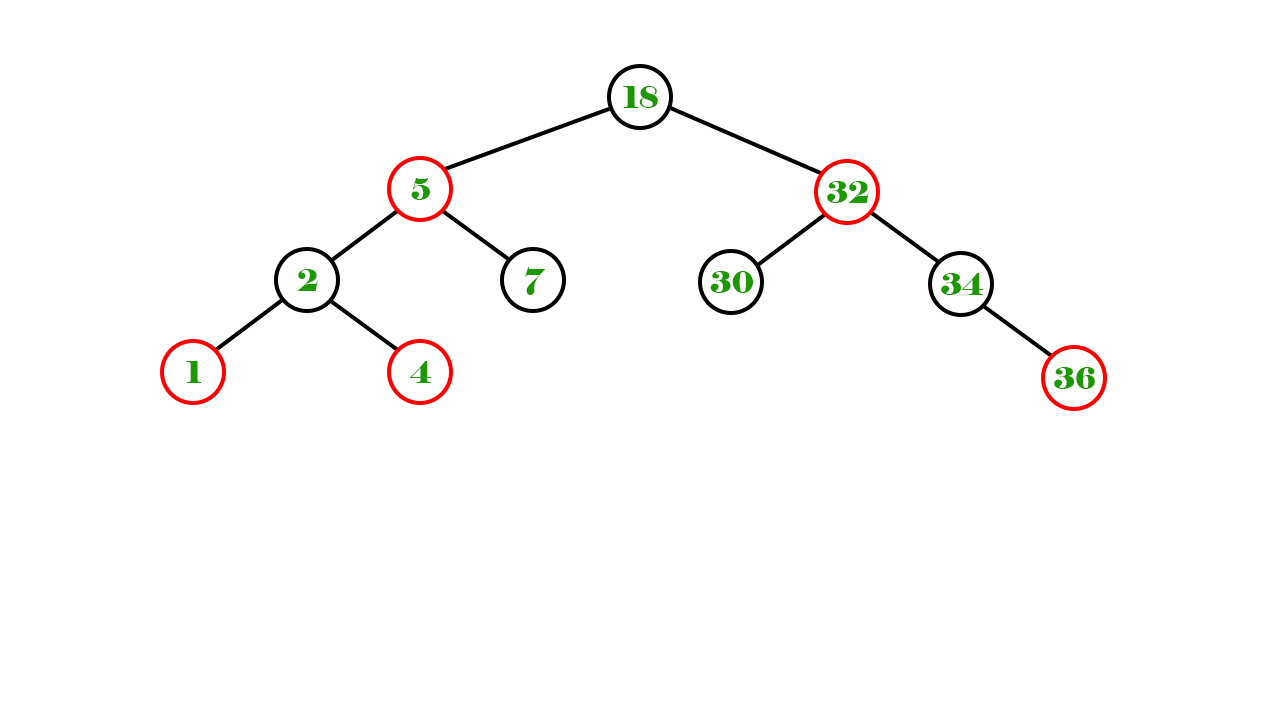
<style>
.page{position:relative;width:1280px;height:720px;background:#ffffff}
.page>*{position:absolute;margin:0}
.t1{font:30px "Elephant-Regular";color:#1d9900}
</style>
<div class="page">
<p class="t1" style="left:623px;top:86px;width:35px;height:22px">18</p>
<p class="t1" style="left:411px;top:178px;width:19px;height:22px">5</p>
<p class="t1" style="left:827px;top:181px;width:42px;height:22px">32</p>
<p class="t1" style="left:297px;top:269px;width:21px;height:22px">2</p>
<p class="t1" style="left:525px;top:267px;width:21px;height:28px">7</p>
<p class="t1" style="left:710px;top:271px;width:43px;height:22px">30</p>
<p class="t1" style="left:941px;top:273px;width:42px;height:22px">34</p>
<p class="t1" style="left:186px;top:361px;width:15px;height:22px">1</p>
<p class="t1" style="left:410px;top:361px;width:21px;height:22px">4</p>
<p class="t1" style="left:1054px;top:367px;width:41px;height:22px">36</p>
</div>
